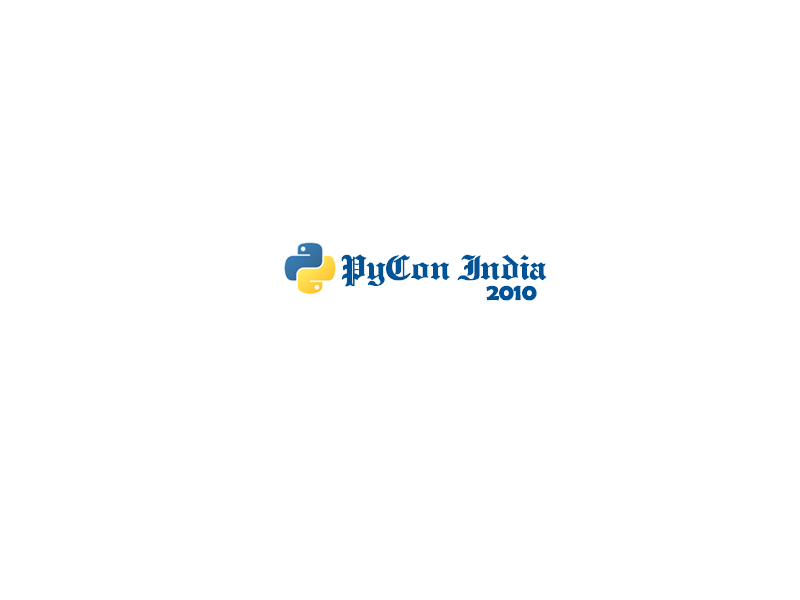
<style>
.page{position:relative;width:800px;height:600px;background:#ffffff}
.page>*{position:absolute;margin:0}
.t1{font:36px "Chivalry";letter-spacing:-0.025em;color:#025296;font-weight:bold}
.t2{font:24px "BerlinSansFBDemi-Bold";letter-spacing:-0.025em;color:#025296;font-weight:bold}
</style>
<div class="page">
<p class="t1" style="left:341px;top:254px;width:206px;height:33px">PyCon India</p>
<p class="t2" style="left:486px;top:285px;width:51px;height:16px">2010</p>
</div>
